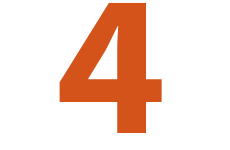
<style>
.page{position:relative;width:230px;height:150px;background:#ffffff}
.page>*{position:absolute;margin:0}
.t1{font:200px "MyriadPro-Bold";color:#d3531a}
</style>
<div class="page">
<p class="t1" style="left:59px;top:2px;width:103px;height:131px">4</p>
</div>
